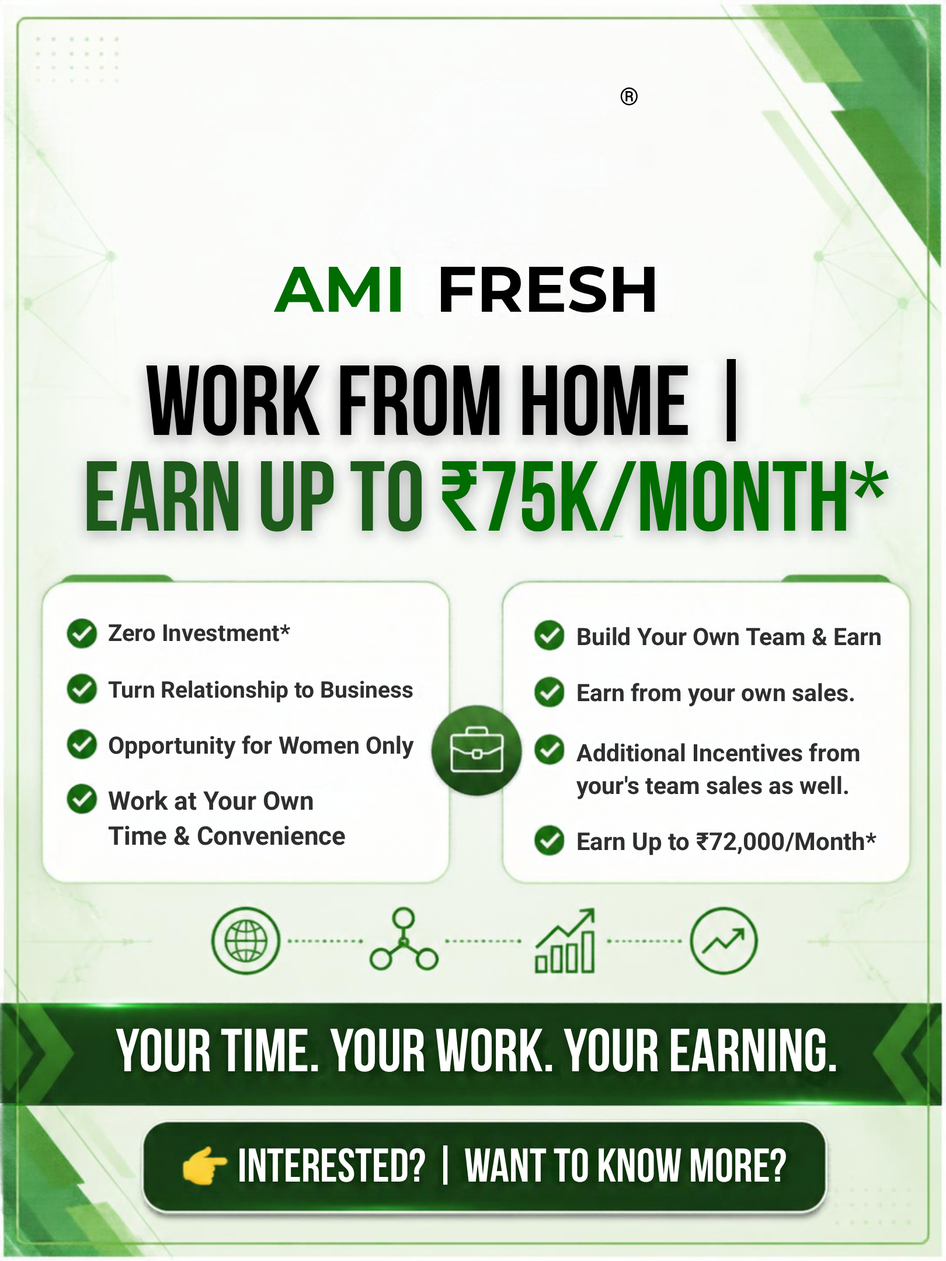
<style>
.page{position:relative;width:946px;height:1261px}
.page>*{position:absolute;margin:0}
.t1{font:24.5px "Roboto-Bold";color:#000000}
.t2{font:64.2px "Montserrat-Bold";color:#006d00}
.t3{font:64.2px "Montserrat-Bold";color:#000000}
.t4{font:99.2px "BebasNeueBold";color:#000000}
.t5{font:99.2px "BebasNeueBold";color:#006d00}
.t6{font:99.2px "BebasNeueBold";color:#1c5b1a}
.t7{font:23.4px "Roboto-Bold";color:#2e2e2e}
.t8{font:23.9px "Roboto-Bold";color:#2e2e2e}
.t9{font:22.8px "Roboto-Bold";color:#2e2e2e}
.t10{font:23.9px/34.8px "Roboto-Bold";color:#2e2e2e}
.t11{font:23.9px/33.1px "Roboto-Bold";color:#2e2e2e}
.t12{font:25.7px/34.8px "Roboto-Bold";color:#2e2e2e}
.t13{font:25.7px "Roboto-Bold";color:#2e2e2e}
.t14{font:24.5px "Roboto-Bold";color:#2e2e2e}
.t15{font:60.7px "BebasNeueBold";color:#ffffff}
.t16{font:47.3px "BebasNeueBold";color:#ffffff}
</style>
<div class="page">
<p class="t1" style="left:620px;top:87px;width:17px;height:19px">®</p>
<p class="t2" style="left:273px;top:267px;width:127px;height:45px">AMI</p>
<p class="t3" style="left:441px;top:266px;width:213px;height:47px">FRESH</p>
<p class="t4" style="left:146px;top:358px;width:590px;height:84px">Work from Home |</p>
<p class="t5" style="left:86px;top:460px;width:802px;height:72px"><span class="t6">Earn Up to </span>₹75K/Month*</p>
<p class="t7" style="left:109px;top:624px;width:181px;height:18px">Zero Investment*</p>
<p class="t8" style="left:577px;top:627px;width:303px;height:19px">Build Your Own Team &amp; Earn</p>
<p class="t9" style="left:108px;top:680px;width:305px;height:22px">Turn Relationship to Business</p>
<p class="t8" style="left:577px;top:682px;width:277px;height:24px">Earn from your own sales.</p>
<p class="t8" style="left:109px;top:735px;width:305px;height:24px">Opportunity for Women Only</p>
<p class="t10" style="left:576px;top:743px;width:283px;height:56px">Additional Incentives from<span class="t11"><br>your's team sales as well.</span></p>
<p class="t12" style="left:108px;top:790px;width:237px;height:55px"><span class="t13">Work at Your Own</span><br>Time &amp; Convenience</p>
<p class="t14" style="left:577px;top:831px;width:299px;height:24px">Earn Up to ₹72,000/Month*</p>
<p class="t15" style="left:116px;top:1028px;width:720px;height:44px">Your Time. Your Work. Your Earning.</p>
<p class="t16" style="left:239px;top:1145px;width:547px;height:40px">Interested? | Want to Know More?</p>
</div>
